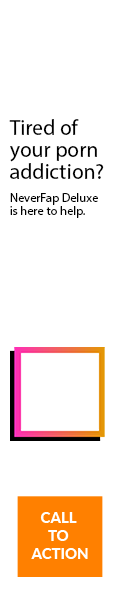
<style>
.page{position:relative;width:120px;height:600px;background:#ffffff}
.page>*{position:absolute;margin:0}
.t1{font:21.6px/22.1px "MyriadPro-Regular";color:#000000}
.t2{font:12.5px/12.8px "MyriadPro-Regular";color:#000000}
.t3{font:14.9px "Lato-Heavy";color:#ffffff}
</style>
<div class="page">
<p class="t1" style="left:9px;top:119px;width:95px;height:60px">Tired of<br>your porn<br>addiction?</p>
<p class="t2" style="left:10px;top:193px;width:88px;height:25px">NeverFap Deluxe<br>is here to help.</p>
<p class="t3" style="left:31px;top:512px;width:57px;height:47px;text-align:center">CALL <br>TO <br>ACTION</p>
</div>
